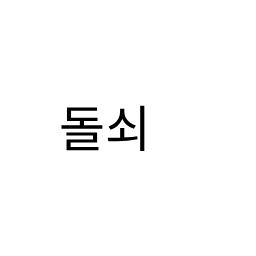
<style>
.page{position:relative;width:256px;height:256px;background:#ffffff}
.page>*{position:absolute;margin:0}
.t1{font:50px "NotoSansKR-Regular";color:#000000}
</style>
<div class="page">
<p class="t1" style="left:61px;top:105px;width:84px;height:46px">돌쇠</p>
</div>
